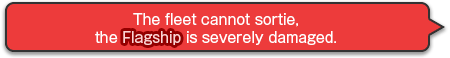
<style>
.page{position:relative;width:450px;height:58px;background:#ed3b3b}
.page>*{position:absolute;margin:0}
.t1{font:14px/18px "GothicMB101Pro-Regular";color:#ffffff}
.t2{font:14px/18px "GothicMB101Pro-Regular";color:#ffd3d3}
</style>
<div class="page">
<p class="t1" style="left:95px;top:13px;width:241px;height:32px;text-align:center">The fleet cannot sortie,<br>the <span class="t2">Flagship</span> is severely damaged.</p>
<p class="t1" style="left:95px;top:13px;width:241px;height:32px;text-align:center">The fleet cannot sortie,<br>the <span class="t2">Flagship</span> is severely damaged.</p>
</div>
